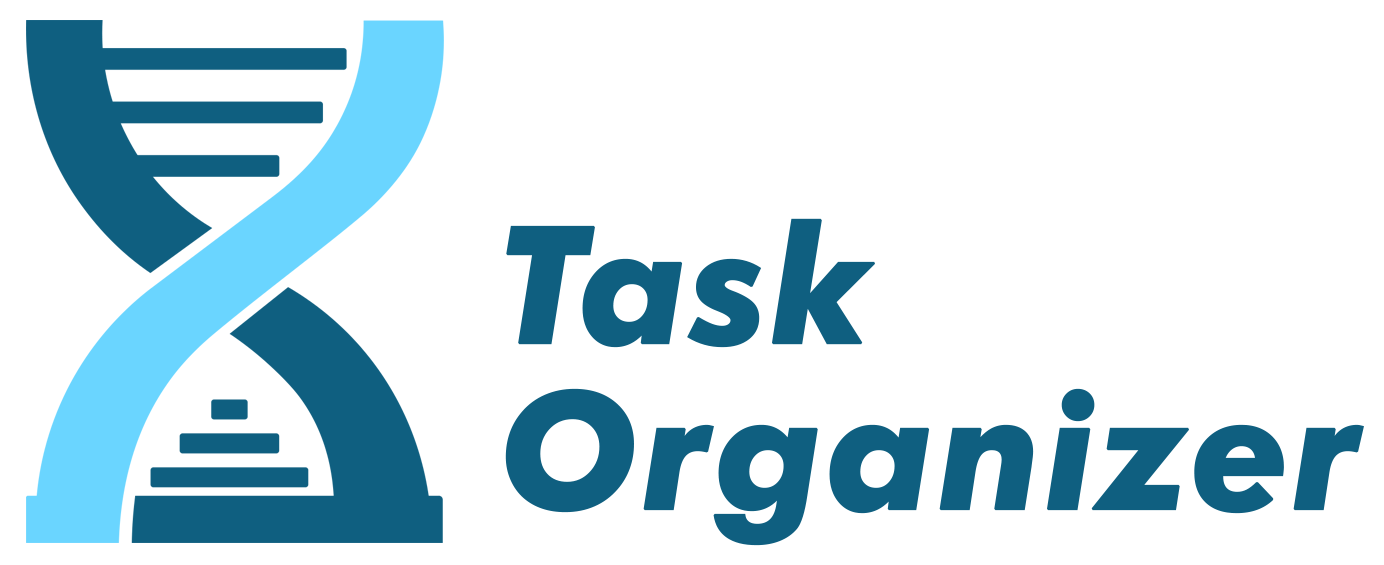
<style>
.page{position:relative;width:1384px;height:565px;background:#ffffff}
.page>*{position:absolute;margin:0}
.t1{font:162.2px/111.8px "FuturaBT-BoldItalic";color:#0f5f80;font-weight:bold}
</style>
<div class="page">
<p class="t1" style="left:505px;top:218px;width:859px;height:328px">Task<br>Organizer</p>
</div>
